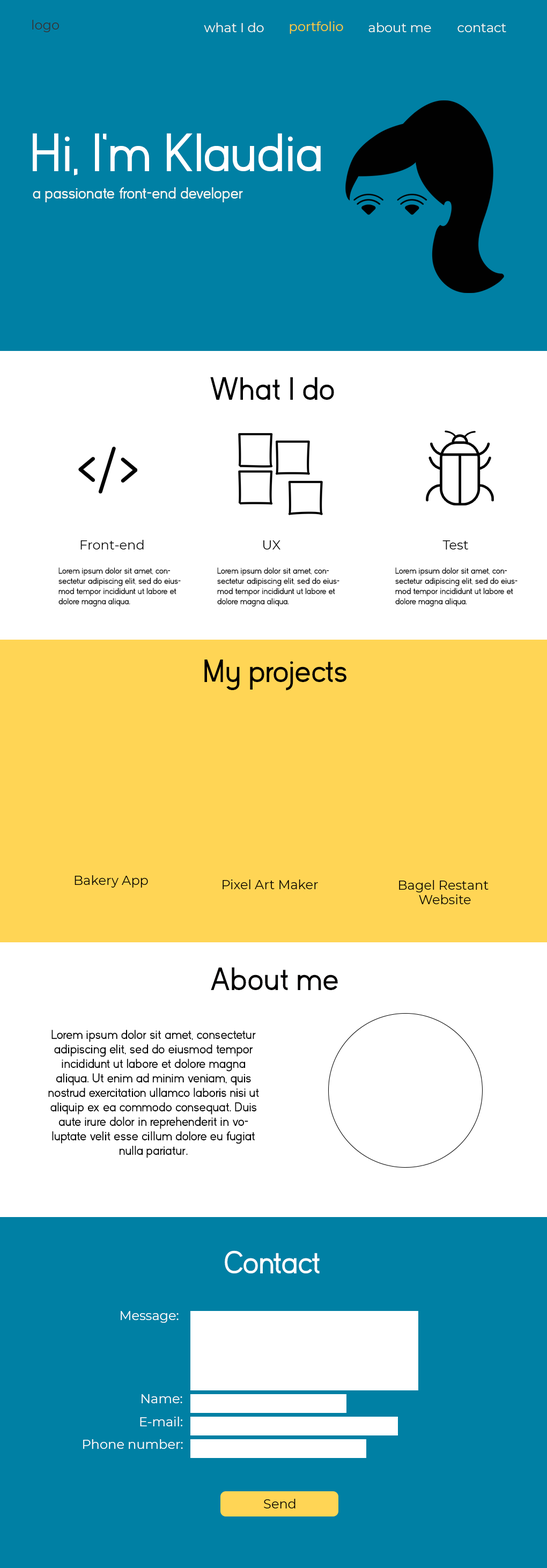
<style>
.page{position:relative;width:547px;height:1568px;background:#0080a4}
.page>*{position:absolute;margin:0}
.t1{font:12.9px "Montserrat-Regular";color:#333333}
.t2{font:12.9px "Montserrat-Regular";color:#f8f8f2}
.t3{font:12.9px "Montserrat-Regular";color:#ffcd34}
.t4{font:53.7px "KayakSans";color:#ffffff}
.t5{font:16.1px "KayakSans";color:#f8f8f2}
.t6{font:32.2px "KayakSans";color:#010101}
.t7{font:12.9px "Montserrat-Regular";color:#000000}
.t8{font:8.6px/10.2px "KayakSans";color:#000000}
.t9{font:32.2px "KayakSans";color:#010000}
.t10{font:12.9px/14.5px "Montserrat-Regular";color:#000000}
.t11{font:12.9px/14.5px "KayakSans";color:#000000}
.t12{font:32.2px "KayakSans";color:#fefefe}
.t13{font:12.9px "Montserrat-Regular";color:#ffffff}
</style>
<div class="page">
<p class="t1" style="left:32px;top:20px;width:27px;height:12px">logo</p>
<p class="t2" style="left:204px;top:23px;width:60px;height:9px">what I do</p>
<p class="t3" style="left:290px;top:21px;width:53px;height:13px">portfolio</p>
<p class="t2" style="left:369px;top:23px;width:62px;height:9px">about me</p>
<p class="t2" style="left:458px;top:24px;width:49px;height:8px">contact</p>
<p class="t4" style="left:33px;top:133px;width:288px;height:42px">Hi, I’m Klaudia</p>
<p class="t5" style="left:33px;top:187px;width:210px;height:15px">a passionate front-end developer</p>
<p class="t6" style="left:210px;top:377px;width:124px;height:23px">What I do</p>
<p class="t7" style="left:80px;top:540px;width:64px;height:9px">Front-end</p>
<p class="t7" style="left:263px;top:540px;width:18px;height:9px">UX</p>
<p class="t7" style="left:443px;top:540px;width:25px;height:9px">Test</p>
<p class="t8" style="left:58px;top:567px;width:123px;height:40px">Lorem ipsum dolor sit amet, consectetur adipiscing elit, sed do eiusmod tempor incididunt ut labore et dolore magna aliqua.</p>
<p class="t8" style="left:217px;top:567px;width:123px;height:40px">Lorem ipsum dolor sit amet, consectetur adipiscing elit, sed do eiusmod tempor incididunt ut labore et dolore magna aliqua.</p>
<p class="t8" style="left:395px;top:567px;width:123px;height:40px">Lorem ipsum dolor sit amet, consectetur adipiscing elit, sed do eiusmod tempor incididunt ut labore et dolore magna aliqua.</p>
<p class="t9" style="left:204px;top:660px;width:143px;height:31px">My projects</p>
<p class="t7" style="left:75px;top:875px;width:73px;height:13px">Bakery App</p>
<p class="t7" style="left:223px;top:880px;width:95px;height:9px">Pixel Art Maker</p>
<p class="t10" style="left:399px;top:880px;width:90px;height:24px;text-align:center">Bagel Restant <br>Website</p>
<p class="t9" style="left:211px;top:967px;width:127px;height:23px">About me</p>
<p class="t11" style="left:48px;top:1030px;width:211px;height:128px;text-align:center">Lorem ipsum dolor sit amet, consectetur adipiscing elit, sed do eiusmod tempor incididunt ut labore et dolore magna aliqua. Ut enim ad minim veniam, quis nostrud exercitation ullamco laboris nisi ut aliquip ex ea commodo consequat. Duis aute irure dolor in reprehenderit in voluptate velit esse cillum dolore eu fugiat nulla pariatur.</p>
<p class="t12" style="left:225px;top:1250px;width:95px;height:23px">Contact</p>
<p class="t13" style="left:121px;top:1311px;width:58px;height:12px">Message:</p>
<p class="t13" style="left:142px;top:1394px;width:40px;height:9px">Name:</p>
<p class="t13" style="left:140px;top:1417px;width:42px;height:9px">E-mail:</p>
<p class="t13" style="left:83px;top:1439px;width:100px;height:10px">Phone number:</p>
<p class="t7" style="left:264px;top:1499px;width:32px;height:9px">Send</p>
</div>
